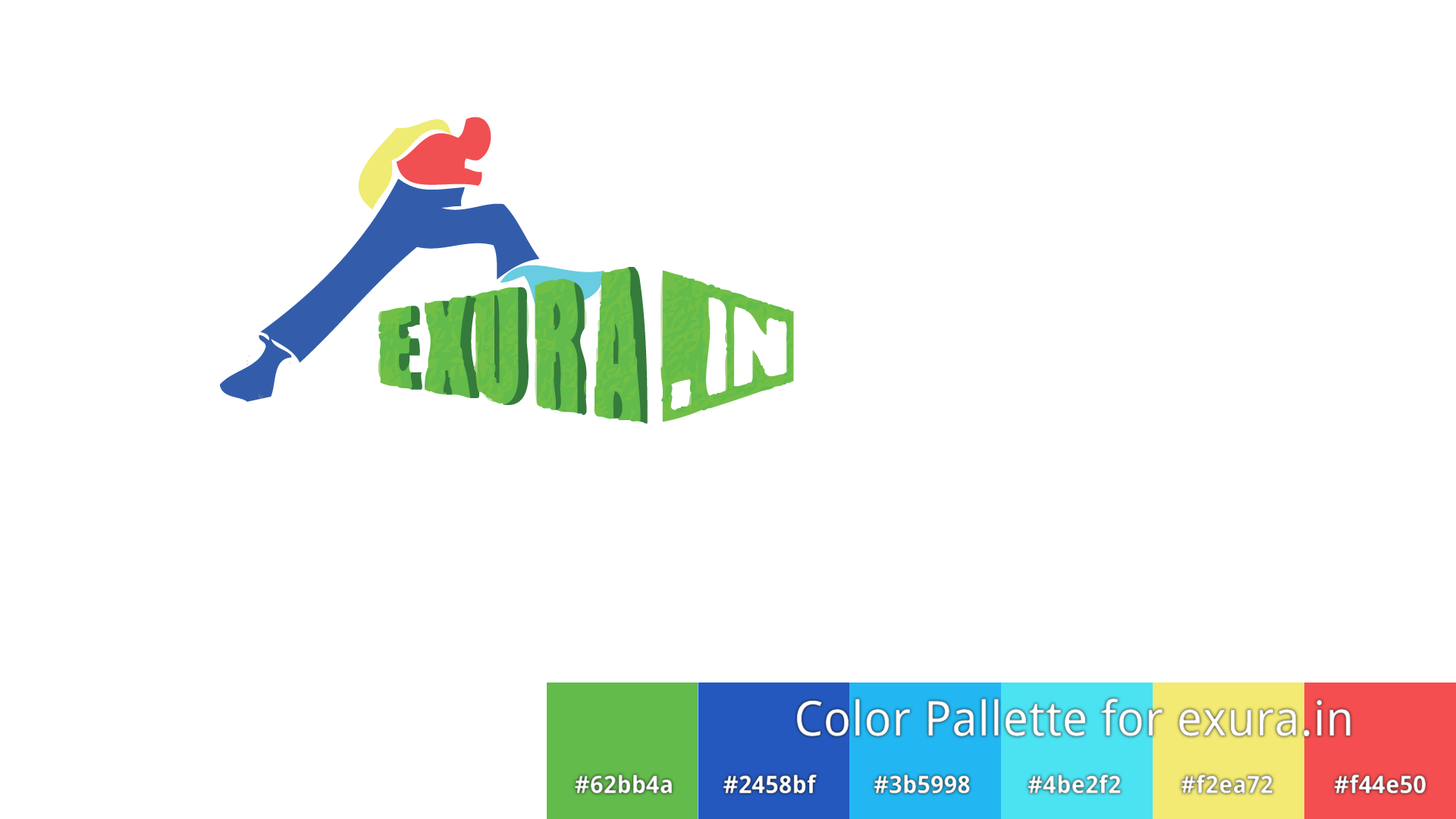
<style>
.page{position:relative;width:1456px;height:819px;background:#ffffff}
.page>*{position:absolute;margin:0}
.t1{font:48.5px "DroidSans";color:#ffffff}
.t2{font:24.3px "DroidSans-Bold";color:#ffffff}
</style>
<div class="page">
<p class="t1" style="left:796px;top:698px;width:555px;height:39px">Color Pallette for exura.in</p>
<p class="t2" style="left:575px;top:774px;width:97px;height:20px">#62bb4a</p>
<p class="t2" style="left:723px;top:774px;width:94px;height:20px">#2458bf</p>
<p class="t2" style="left:874px;top:774px;width:96px;height:20px">#3b5998</p>
<p class="t2" style="left:1028px;top:774px;width:93px;height:20px">#4be2f2</p>
<p class="t2" style="left:1181px;top:774px;width:92px;height:20px">#f2ea72</p>
<p class="t2" style="left:1334px;top:774px;width:92px;height:20px">#f44e50</p>
</div>
